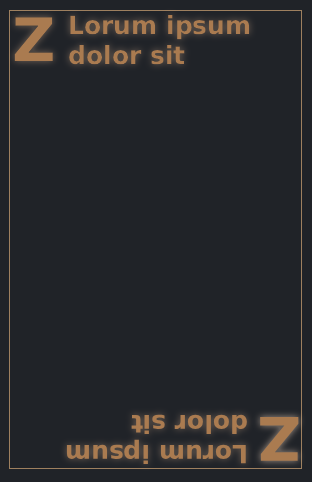
<style>
.page{position:relative;width:312px;height:482px;background:#202328}
.page>*{position:absolute;margin:0}
.t1{font:60px "DejaVuSans-Bold";color:#aa7b50}
.t2{font:25px "DejaVuSans-Bold";color:#aa7b50}
</style>
<div class="page">
<p class="t1" style="left:14px;top:17px;width:39px;height:44px">Z</p>
<p class="t2" style="left:69px;top:15px;width:181px;height:50px">Lorum ipsum<br>dolor sit</p>
<p class="t2" style="left:66px;top:414px;width:181px;height:50px;rotate:180deg">Lorum ipsum<br>dolor sit</p>
<p class="t1" style="left:260px;top:417px;width:39px;height:44px;rotate:180deg">Z</p>
</div>
